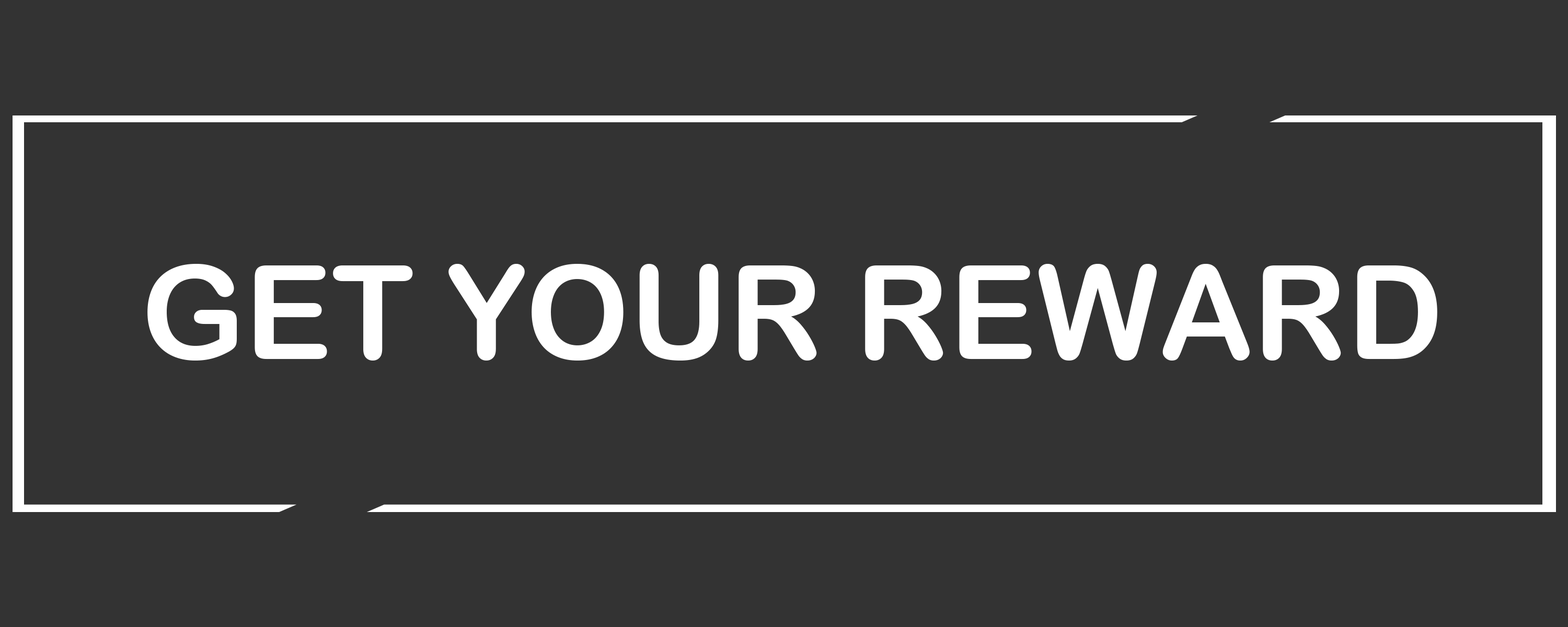
<style>
.page{position:relative;width:1568px;height:627px;background:#333333}
.page>*{position:absolute;margin:0}
.t1{font:130.7px "ArialRoundedMTBold";color:#ffffff}
</style>
<div class="page">
<p class="t1" style="left:147px;top:264px;width:1290px;height:97px">GET YOUR REWARD</p>
</div>
